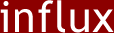
<style>
.page{position:relative;width:114px;height:33px;background:#8c0000}
.page>*{position:absolute;margin:0}
.t1{font:43px "TrebuchetMS";letter-spacing:0.025em;color:#ffffff}
</style>
<div class="page">
<p class="t1" style="left:0px;top:0px;width:114px;height:33px">influx</p>
</div>
